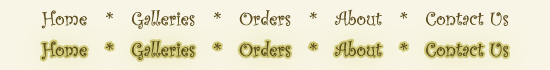
<style>
.page{position:relative;width:550px;height:70px;background:#f8f5e6}
.page>*{position:absolute;margin:0}
.t1{font:20px "CurlzMT";color:#584818}
</style>
<div class="page">
<p class="t1" style="left:41px;top:9px;width:468px;height:20px">Home   *   Galleries   *   Orders   *   About   *   Contact Us</p>
<p class="t1" style="left:41px;top:40px;width:468px;height:20px">Home   *   Galleries   *   Orders   *   About   *   Contact Us</p>
</div>
